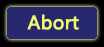
<style>
.page{position:relative;width:104px;height:47px;background:#28286e}
.page>*{position:absolute;margin:0}
.t1{font:18px "MicrosoftYaHeiUI";color:#f0fa6e;font-weight:bold}
</style>
<div class="page">
<p class="t1" style="left:27px;top:14px;width:52px;height:16px">Abort</p>
</div>
